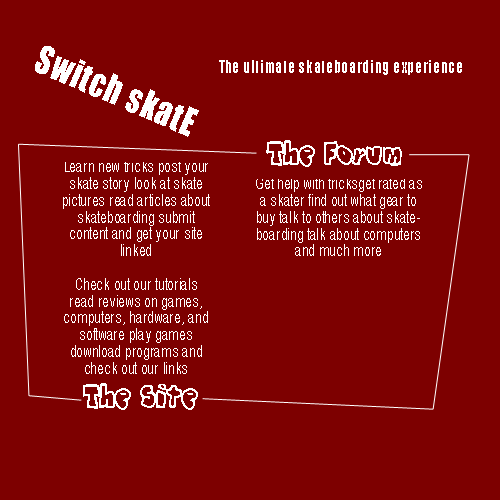
<style>
.page{position:relative;width:500px;height:500px;background:#7d0000}
.page>*{position:absolute;margin:0}
.t1{font:36px "Impact";letter-spacing:0.05em;color:#ffffff;scale:0.83 1}
.t2{font:16.8px "Impact";letter-spacing:0.05em;color:#ffffff;scale:0.83 1}
.t3{font:28.8px "Graffiti";letter-spacing:0.05em;color:#ffffff;scale:0.83 1}
.t4{font:16.8px "ArialNarrow";letter-spacing:0.05em;color:#ffffff;scale:0.83 1}
</style>
<div class="page">
<p class="t1" style="left:35px;top:46px;width:164px;height:91px;rotate:23deg">Switch skatE</p>
<p class="t2" style="left:219px;top:60px;width:243px;height:15px">The ultimate skateboarding experience</p>
<p class="t3" style="left:266px;top:140px;width:136px;height:27px">The Forum</p>
<p class="t4" style="left:63px;top:162px;width:147px;height:212px;text-align:center">Learn new tricks post your skate story look at skate pictures read articles about skateboarding submit content and get your site linked<br><br>Check out our tutorials read reviews on games, computers, hardware, and software play games download programs and check out our links</p>
<p class="t4" style="left:256px;top:179px;width:166px;height:77px;text-align:center">Get help with tricksget rated as a skater find out what gear to buy talk to others about skateboarding talk about computers and much more</p>
</div>
